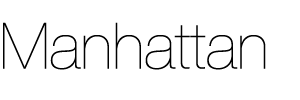
<style>
.page{position:relative;width:300px;height:100px;background:#ffffff}
.page>*{position:absolute;margin:0}
.t1{font:64px "HelveticaNeue-UltraLight";color:#000000}
</style>
<div class="page">
<p class="t1" style="left:3px;top:22px;width:263px;height:48px">Manhattan</p>
</div>
